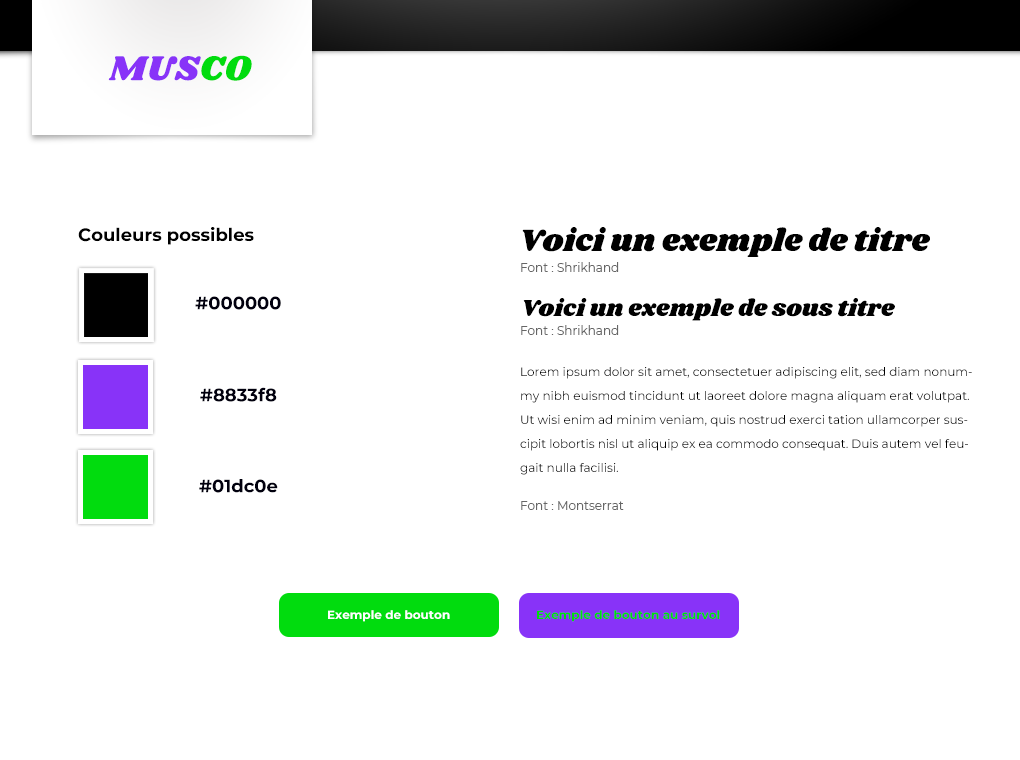
<style>
.page{position:relative;width:1020px;height:760px;background:#ffffff}
.page>*{position:absolute;margin:0}
.t1{font:36px "Shrikhand-Regular";color:#8833f8}
.t2{font:36px "Shrikhand-Regular";color:#01dc0e}
.t3{font:18px "Montserrat-Bold";color:#000000}
.t4{font:32px "Shrikhand-Regular";color:#000000}
.t5{font:12px "Montserrat-Regular";color:#666666}
.t6{font:18px "Montserrat-Bold";color:#01000e}
.t7{font:24px "Shrikhand-Regular";color:#000000}
.t8{font:12px/24px "Montserrat-Regular";color:#000000}
.t9{font:12px "Montserrat-Bold";color:#ffffff}
.t10{font:12px "Montserrat-Bold";color:#01dc0e}
</style>
<div class="page">
<p class="t1" style="left:108px;top:55px;width:144px;height:26px">MUS<span class="t2">CO</span></p>
<p class="t3" style="left:78px;top:227px;width:176px;height:18px">Couleurs possibles</p>
<p class="t4" style="left:522px;top:227px;width:408px;height:30px">Voici un exemple de titre</p>
<p class="t5" style="left:521px;top:262px;width:98px;height:10px">Font : Shrikhand</p>
<p class="t6" style="left:195px;top:296px;width:86px;height:14px">#000000</p>
<p class="t7" style="left:523px;top:298px;width:372px;height:23px">Voici un exemple de sous titre</p>
<p class="t5" style="left:521px;top:325px;width:98px;height:10px">Font : Shrikhand</p>
<p class="t8" style="left:520px;top:367px;width:452px;height:108px">Lorem ipsum dolor sit amet, consectetuer adipiscing elit, sed diam nonummy nibh euismod tincidunt ut laoreet dolore magna aliquam erat volutpat. Ut wisi enim ad minim veniam, quis nostrud exerci tation ullamcorper suscipit lobortis nisl ut aliquip ex ea commodo consequat. Duis autem vel feugait nulla facilisi.</p>
<p class="t6" style="left:200px;top:387px;width:77px;height:15px">#8833f8</p>
<p class="t6" style="left:199px;top:479px;width:79px;height:14px">#01dc0e</p>
<p class="t5" style="left:521px;top:501px;width:103px;height:9px">Font : Montserrat</p>
<p class="t9" style="left:328px;top:610px;width:122px;height:12px">Exemple de bouton</p>
<p class="t10" style="left:537px;top:610px;width:183px;height:12px">Exemple de bouton au survol</p>
</div>
